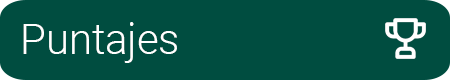
<style>
.page{position:relative;width:450px;height:80px;background:#004d40}
.page>*{position:absolute;margin:0}
.t1{font:41.7px "Roboto-Light";color:#ffffff}
</style>
<div class="page">
<p class="t1" style="left:23px;top:22px;width:154px;height:41px">Puntajes</p>
</div>
